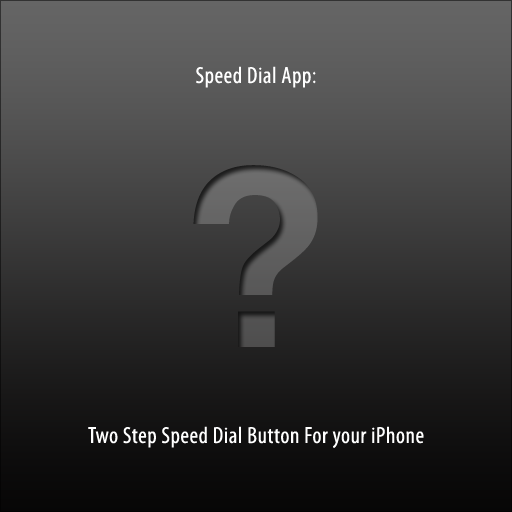
<style>
.page{position:relative;width:512px;height:512px}
.page>*{position:absolute;margin:0}
.t1{font:23.4px "MyriadPro-Cond";letter-spacing:0.025em;color:#ffffff}
.t2{font:250px "Helvetica-Bold";letter-spacing:0.025em;color:#616060}
</style>
<div class="page">
<p class="t1" style="left:196px;top:66px;width:120px;height:22px">Speed Dial App:</p>
<p class="t2" style="left:193px;top:165px;width:125px;height:182px">?</p>
<p class="t1" style="left:88px;top:426px;width:336px;height:22px">Two Step Speed Dial Button For your iPhone</p>
</div>
